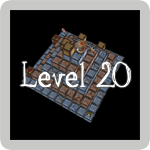
<style>
.page{position:relative;width:150px;height:150px;background:#000000}
.page>*{position:absolute;margin:0}
.t1{font:28px "aKa";letter-spacing:0.05em;color:#ffffff;font-weight:bold;scale:0.9 1}
</style>
<div class="page">
<p class="t1" style="left:20px;top:61px;width:111px;height:27px">Level 20</p>
</div>
